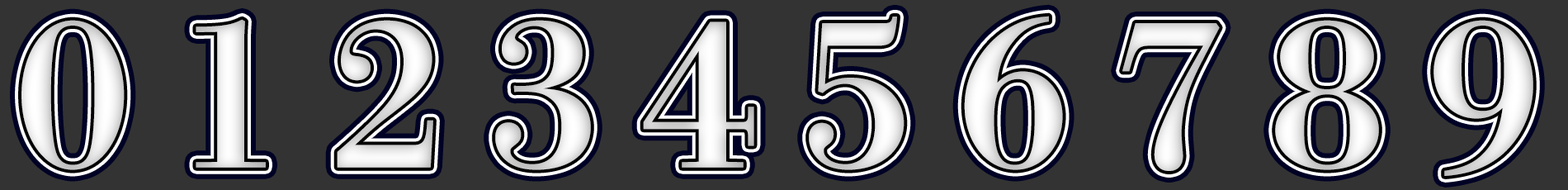
<style>
.page{position:relative;width:1568px;height:190px;background:#333333}
.page>*{position:absolute;margin:0}
.t1{font:198.1px "DNPShuei4goBStd-Hv";color:#e5e5e5}
.t2{font:198.1px "DNPShuei4goBStd-Hv";color:#eaeaea}
.t3{font:198.1px "DNPShuei4goBStd-Hv";color:#ececec}
.t4{font:198.1px "DNPShuei4goBStd-Hv";color:#ffffff}
.t5{font:198.1px "DNPShuei4goBStd-Hv";color:#e6e6e6}
.t6{font:198.1px "DNPShuei4goBStd-Hv"}
.t7{font:198.1px "DNPShuei4goBStd-Hv";color:#e8e8e8}
.t8{font:198.1px "DNPShuei4goBStd-Hv";color:#e9e9e9}
</style>
<div class="page">
<p class="t1" style="left:809px;top:17px;width:95px;height:153px">5</p>
<p class="t2" style="left:964px;top:16px;width:99px;height:154px">6</p>
<p class="t3" style="left:21px;top:20px;width:104px;height:150px">0</p>
<p class="t4" style="left:196px;top:19px;width:70px;height:149px">1</p>
<p class="t5" style="left:337px;top:20px;width:96px;height:148px">2</p>
<p class="t1" style="left:495px;top:20px;width:96px;height:150px">3</p>
<p class="t6" style="left:643px;top:21px;width:111px;height:147px">4</p>
<p class="t5" style="left:1122px;top:23px;width:98px;height:148px">7</p>
<p class="t7" style="left:1275px;top:20px;width:104px;height:150px">8</p>
<p class="t8" style="left:1433px;top:20px;width:100px;height:156px">9</p>
</div>
